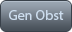
<style>
.page{position:relative;width:72px;height:32px}
.page>*{position:absolute;margin:0}
.t1{font:14px "MyriadPro-Regular";color:#ccdced}
</style>
<div class="page">
<p class="t1" style="left:9px;top:10px;width:55px;height:10px">Gen Obst</p>
</div>
